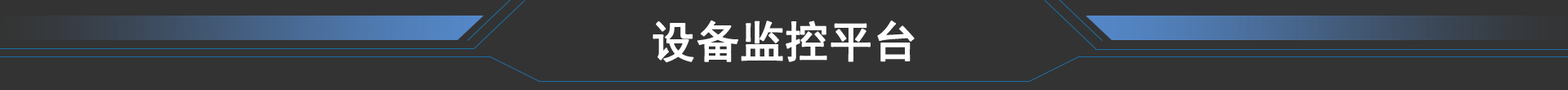
<style>
.page{position:relative;width:1568px;height:90px;background:#333333}
.page>*{position:absolute;margin:0}
.t1{font:43.4px "SimHei";color:#ffffff;font-weight:bold}
</style>
<div class="page">
<p class="t1" style="left:653px;top:20px;width:262px;height:43px">设备监控平台</p>
</div>
